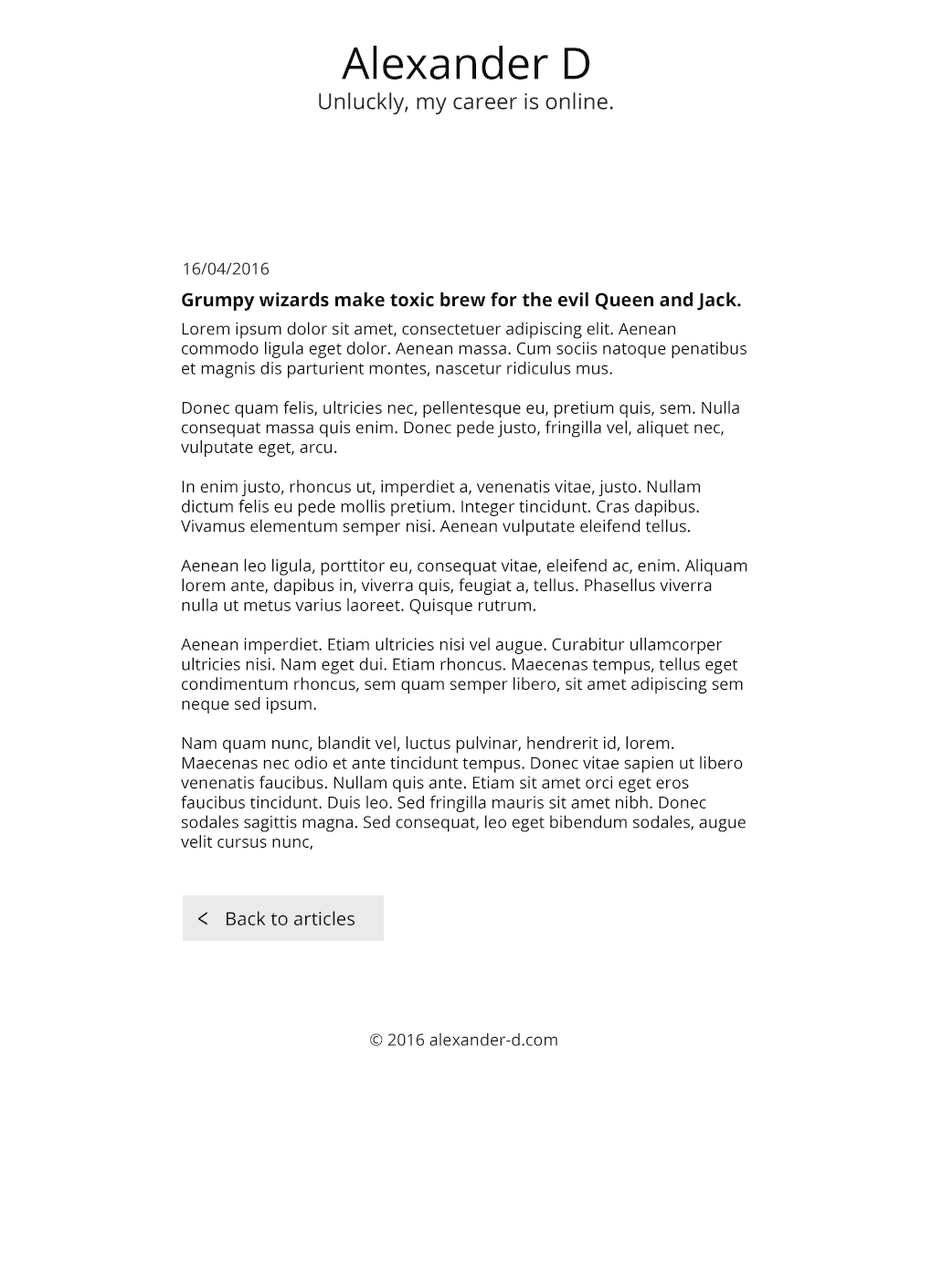
<style>
.page{position:relative;width:932px;height:1279px;background:#ffffff}
.page>*{position:absolute;margin:0}
.t1{font:43.9px "OpenSans";color:#0e0e0e}
.t2{font:21.9px "OpenSans";color:#242424}
.t3{font:16.4px "OpenSans";color:#242424}
.t4{font:18.3px "OpenSans-Bold";color:#0e0e0e}
.t5{font:16.4px "OpenSans";color:#0e0e0e}
.t6{font:27.7px "OpenSans";color:#0e0e0e;scale:0.67 1}
.t7{font:18.4px "OpenSans";color:#0e0e0e}
</style>
<div class="page">
<p class="t1" style="left:342px;top:46px;width:247px;height:34px">Alexander D</p>
<p class="t2" style="left:319px;top:92px;width:294px;height:23px">Unluckly, my career is online.</p>
<p class="t3" style="left:184px;top:262px;width:85px;height:13px">16/04/2016</p>
<p class="t4" style="left:182px;top:292px;width:559px;height:19px">Grumpy wizards make toxic brew for the evil Queen and Jack.</p>
<p class="t5" style="left:181px;top:322px;width:566px;height:529px">Lorem ipsum dolor sit amet, consectetuer adipiscing elit. Aenean <br>commodo ligula eget dolor. Aenean massa. Cum sociis natoque penatibus <br>et magnis dis parturient montes, nascetur ridiculus mus.<br><br>Donec quam felis, ultricies nec, pellentesque eu, pretium quis, sem. Nulla <br>consequat massa quis enim. Donec pede justo, fringilla vel, aliquet nec, <br>vulputate eget, arcu.<br><br>In enim justo, rhoncus ut, imperdiet a, venenatis vitae, justo. Nullam <br>dictum felis eu pede mollis pretium. Integer tincidunt. Cras dapibus. <br>Vivamus elementum semper nisi. Aenean vulputate eleifend tellus.<br><br>Aenean leo ligula, porttitor eu, consequat vitae, eleifend ac, enim. Aliquam <br>lorem ante, dapibus in, viverra quis, feugiat a, tellus. Phasellus viverra <br>nulla ut metus varius laoreet. Quisque rutrum.<br><br>Aenean imperdiet. Etiam ultricies nisi vel augue. Curabitur ullamcorper <br>ultricies nisi. Nam eget dui. Etiam rhoncus. Maecenas tempus, tellus eget <br>condimentum rhoncus, sem quam semper libero, sit amet adipiscing sem <br>neque sed ipsum.<br><br>Nam quam nunc, blandit vel, luctus pulvinar, hendrerit id, lorem. <br>Maecenas nec odio et ante tincidunt tempus. Donec vitae sapien ut libero <br>venenatis faucibus. Nullam quis ante. Etiam sit amet orci eget eros <br>faucibus tincidunt. Duis leo. Sed fringilla mauris sit amet nibh. Donec <br>sodales sagittis magna. Sed consequat, leo eget bibendum sodales, augue <br>velit cursus nunc,</p>
<p class="t6" style="left:198px;top:912px;width:9px;height:14px;rotate:180deg">&gt;</p>
<p class="t7" style="left:227px;top:911px;width:128px;height:15px">Back to articles</p>
<p class="t3" style="left:370px;top:1033px;width:187px;height:13px">© 2016 alexander-d.com</p>
</div>
